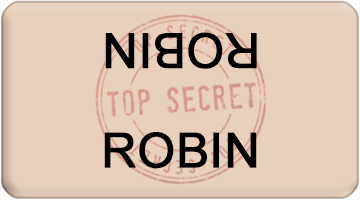
<style>
.page{position:relative;width:360px;height:200px;background:#e8d0bb}
.page>*{position:absolute;margin:0}
.t1{font:48px "ArialMT";color:#000000;font-weight:bold}
</style>
<div class="page">
<p class="t1" style="left:105px;top:32px;width:152px;height:37px;rotate:180deg">ROBIN</p>
<p class="t1" style="left:104px;top:132px;width:153px;height:37px">ROBIN</p>
</div>
